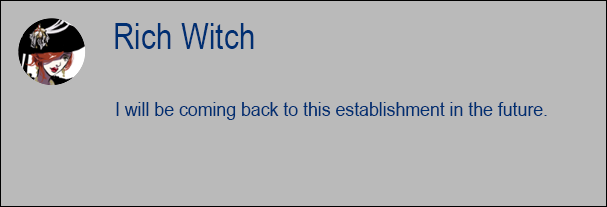
<style>
.page{position:relative;width:607px;height:207px;background:#bababa}
.page>*{position:absolute;margin:0}
.t1{font:36.3px "ArialNarrow";color:#002f72}
.t2{font:20.5px "ArialNarrow";color:#002f72;scale:1.05 1}
</style>
<div class="page">
<p class="t1" style="left:115px;top:23px;width:139px;height:26px">Rich Witch</p>
<p class="t2" style="left:116px;top:102px;width:431px;height:18px">I will be coming back to this establishment in the future.</p>
</div>
